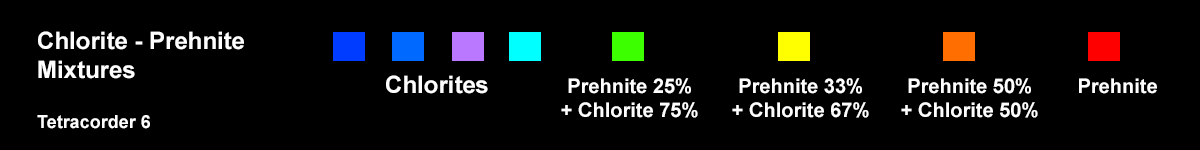
<style>
.page{position:relative;width:1200px;height:150px;background:#000000}
.page>*{position:absolute;margin:0}
.t1{font:24px "Arial-BoldMT";color:#fefefe}
.t2{font:18px "Arial-BoldMT";color:#fefefe}
.t3{font:20px "Arial-BoldMT";color:#fefefe}
</style>
<div class="page">
<p class="t1" style="left:37px;top:31px;width:207px;height:98px">Chlorite - Prehnite<br>Mixtures<br><br><span class="t2">Tetracorder 6</span></p>
<p class="t1" style="left:386px;top:75px;width:102px;height:19px">Chlorites</p>
<p class="t3" style="left:561px;top:78px;width:137px;height:40px;text-align:center">Prehnite 25%<br>+ Chlorite 75%</p>
<p class="t3" style="left:732px;top:78px;width:137px;height:40px;text-align:center">Prehnite 33%<br>+ Chlorite 67%</p>
<p class="t3" style="left:901px;top:78px;width:137px;height:40px;text-align:center">Prehnite 50%<br>+ Chlorite 50%</p>
<p class="t3" style="left:1079px;top:78px;width:78px;height:16px">Prehnite</p>
</div>
